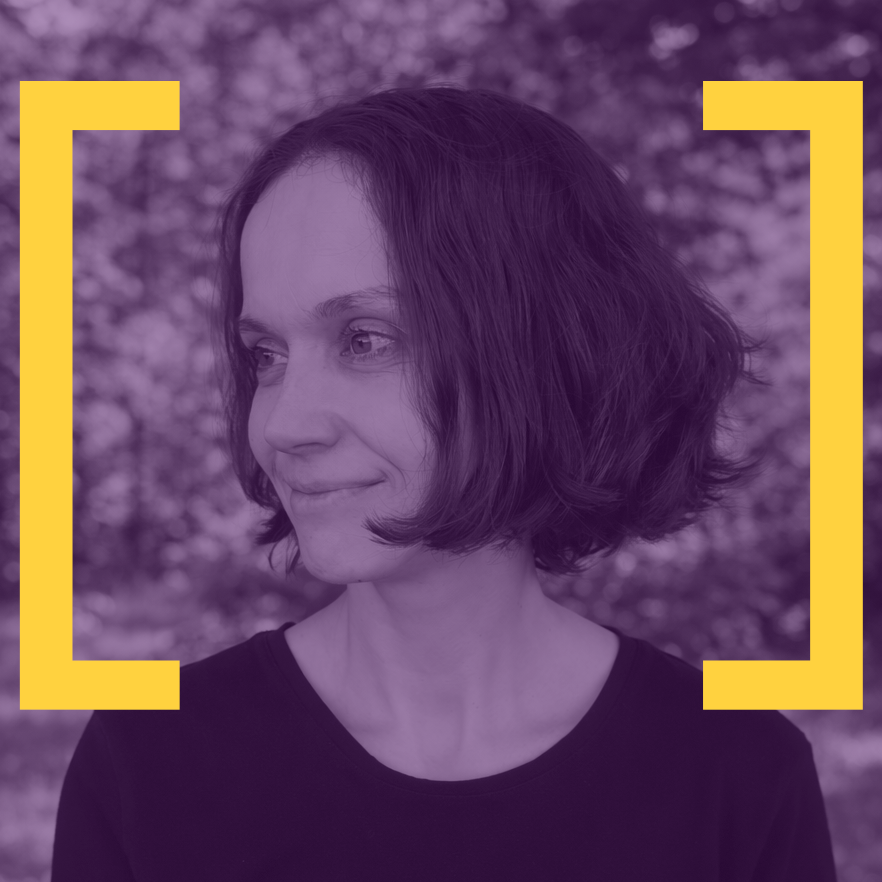
<style>
.page{position:relative;width:882px;height:882px}
.page>*{position:absolute;margin:0}
.t1{font:700px "WorkSans-Regular";color:#ffd23f}
</style>
<div class="page">
<p class="t1" style="left:19px;top:81px;width:844px;height:629px">[  ]</p>
</div>
